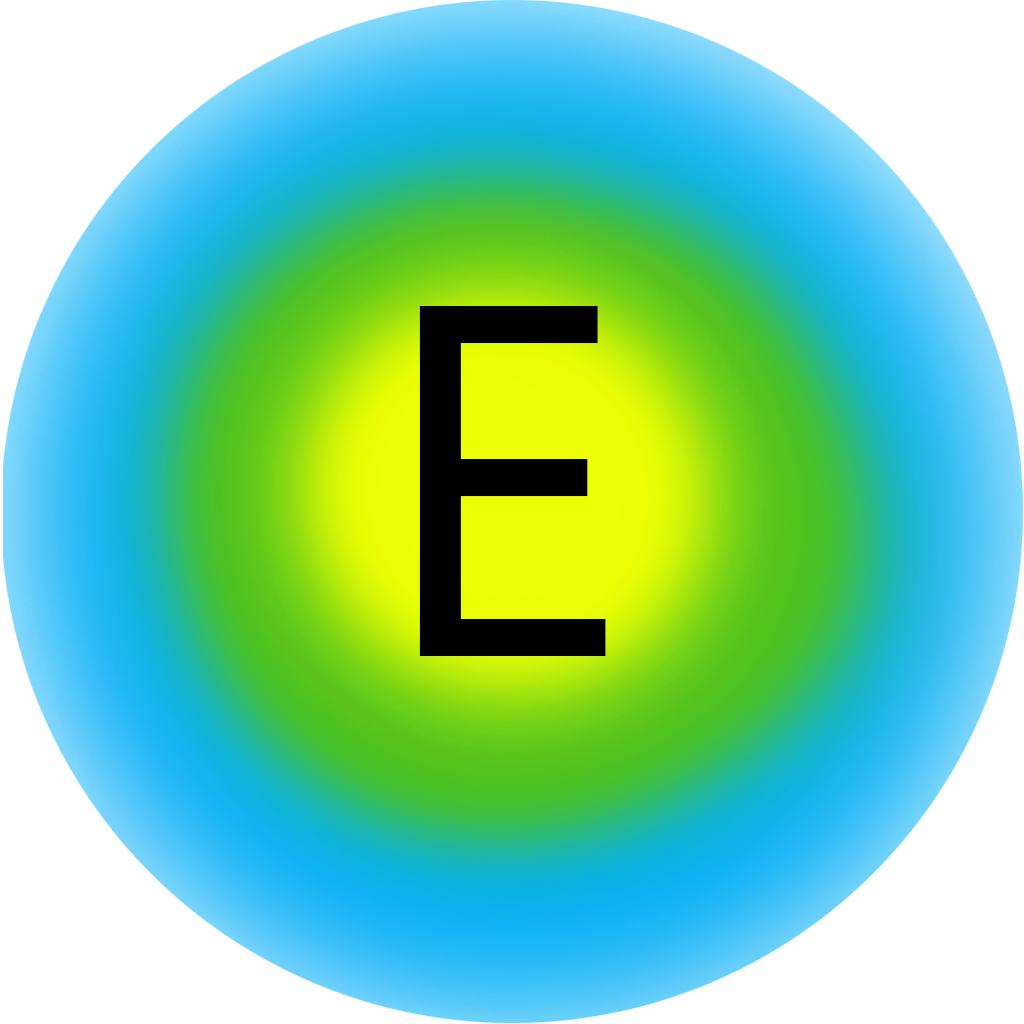
<style>
.page{position:relative;width:1024px;height:1024px;background:#ffffff}
.page>*{position:absolute;margin:0}
.t1{font:500px "MyanmarText";color:#000000}
</style>
<div class="page">
<p class="t1" style="left:419px;top:306px;width:187px;height:350px">E</p>
</div>
